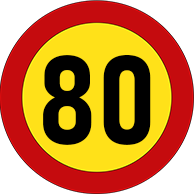
<style>
.page{position:relative;width:194px;height:194px;background:#ffe119}
.page>*{position:absolute;margin:0}
.t1{font:124.4px "Bahnschrift-BoldSemiCondensed";color:#000000}
</style>
<div class="page">
<p class="t1" style="left:43px;top:55px;width:108px;height:90px">80</p>
</div>
